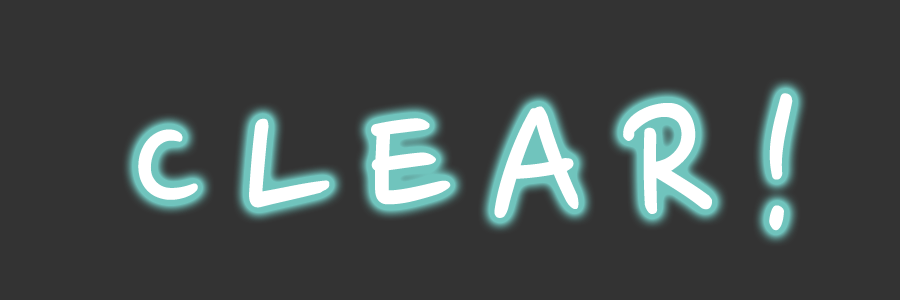
<style>
.page{position:relative;width:900px;height:300px;background:#333333}
.page>*{position:absolute;margin:0}
.t1{font:200px "NanumPen";letter-spacing:0.2em;color:#ffffff}
</style>
<div class="page">
<p class="t1" style="left:138px;top:93px;width:655px;height:138px">CLEAR!</p>
</div>
